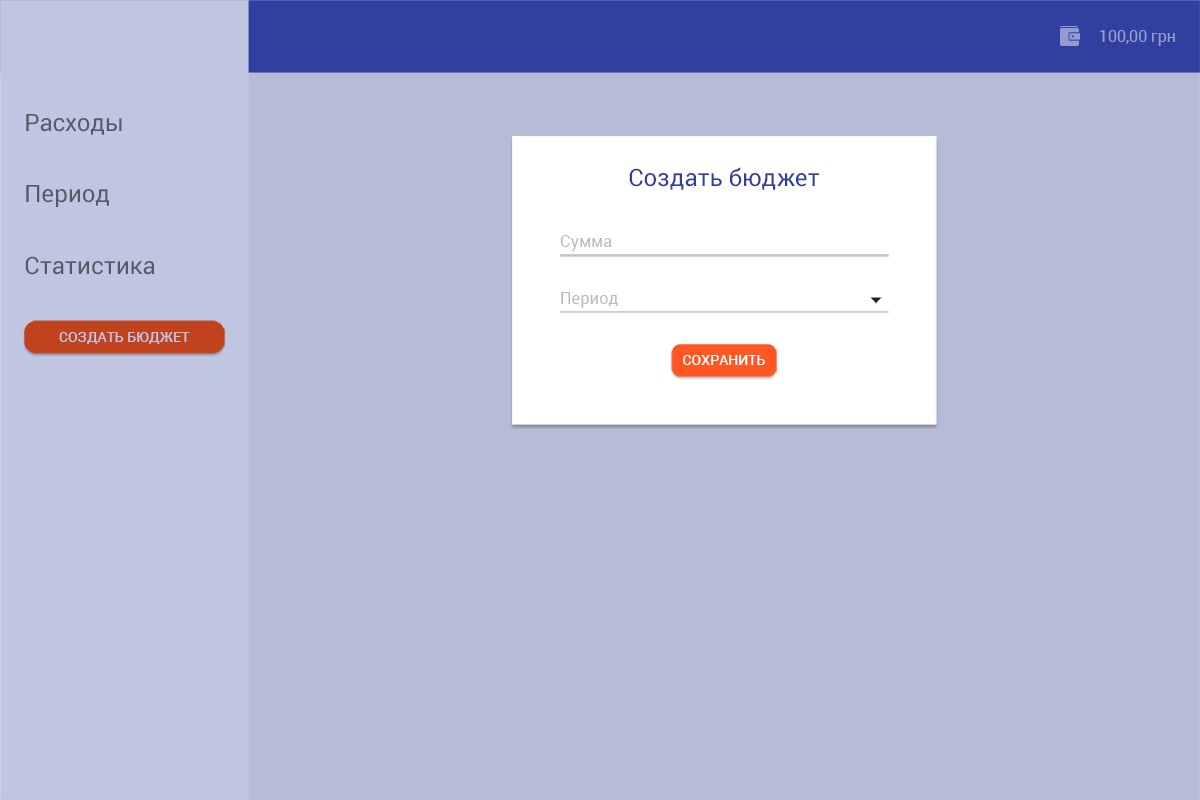
<style>
.page{position:relative;width:1200px;height:800px;background:#b6bbd7}
.page>*{position:absolute;margin:0}
.t1{font:16px "Roboto-Regular";color:#959cce}
.t2{font:24px "Roboto-Regular";color:#585a68}
.t3{font:24px "Roboto-Regular";color:#303f9f}
.t4{font:16px "Roboto-Regular";letter-spacing:0.01em;color:#bbbbbb}
.t5{font:14px "Roboto-Medium";letter-spacing:0.005em;color:#c0c5e2;text-transform:uppercase}
.t6{font:14px "Roboto-Medium";letter-spacing:0.005em;color:#ffffff;text-transform:uppercase}
</style>
<div class="page">
<p class="t1" style="left:1100px;top:30px;width:75px;height:16px">100,00 грн</p>
<p class="t2" style="left:26px;top:114px;width:96px;height:21px">Расходы</p>
<p class="t3" style="left:629px;top:167px;width:190px;height:23px">Создать бюджет</p>
<p class="t2" style="left:26px;top:185px;width:84px;height:22px">Период</p>
<p class="t4" style="left:560px;top:235px;width:52px;height:16px">Сумма</p>
<p class="t2" style="left:25px;top:256px;width:130px;height:19px">Статистика</p>
<p class="t4" style="left:561px;top:292px;width:57px;height:16px">Период</p>
<p class="t5" style="left:59px;top:332px;width:131px;height:12px">создать бюджет</p>
<p class="t6" style="left:683px;top:355px;width:82px;height:10px">сохранить</p>
</div>
